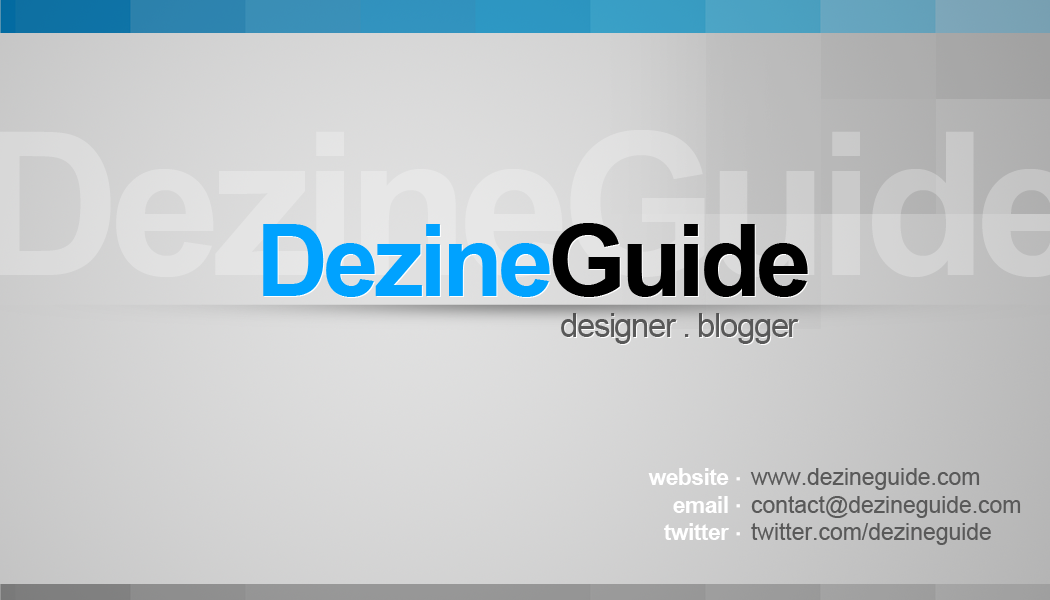
<style>
.page{position:relative;width:1050px;height:600px}
.page>*{position:absolute;margin:0}
.t1{font:100px "Arial-BoldMT";letter-spacing:-0.05em;color:#00a2ff}
.t2{font:100px "Arial-BoldMT";letter-spacing:-0.05em;color:#000000}
.t3{font:33.3px "ArialMT";letter-spacing:-0.05em;color:#595959}
.t4{font:22.9px "Arial-BoldMT";letter-spacing:-0.025em;color:#ffffff}
.t5{font:22.9px "ArialMT";color:#595959}
</style>
<div class="page">
<p class="t1" style="left:263px;top:223px;width:545px;height:74px">Dezine<span class="t2">Guide</span></p>
<p class="t3" style="left:561px;top:313px;width:238px;height:31px">designer . blogger</p>
<p class="t4" style="left:648px;top:468px;width:81px;height:72px;text-align:right">website<br>email<br>twitter</p>
<p class="t5" style="left:750px;top:468px;width:271px;height:77px">www.dezineguide.com<br>contact@dezineguide.com<br>twitter.com/dezineguide</p>
</div>
